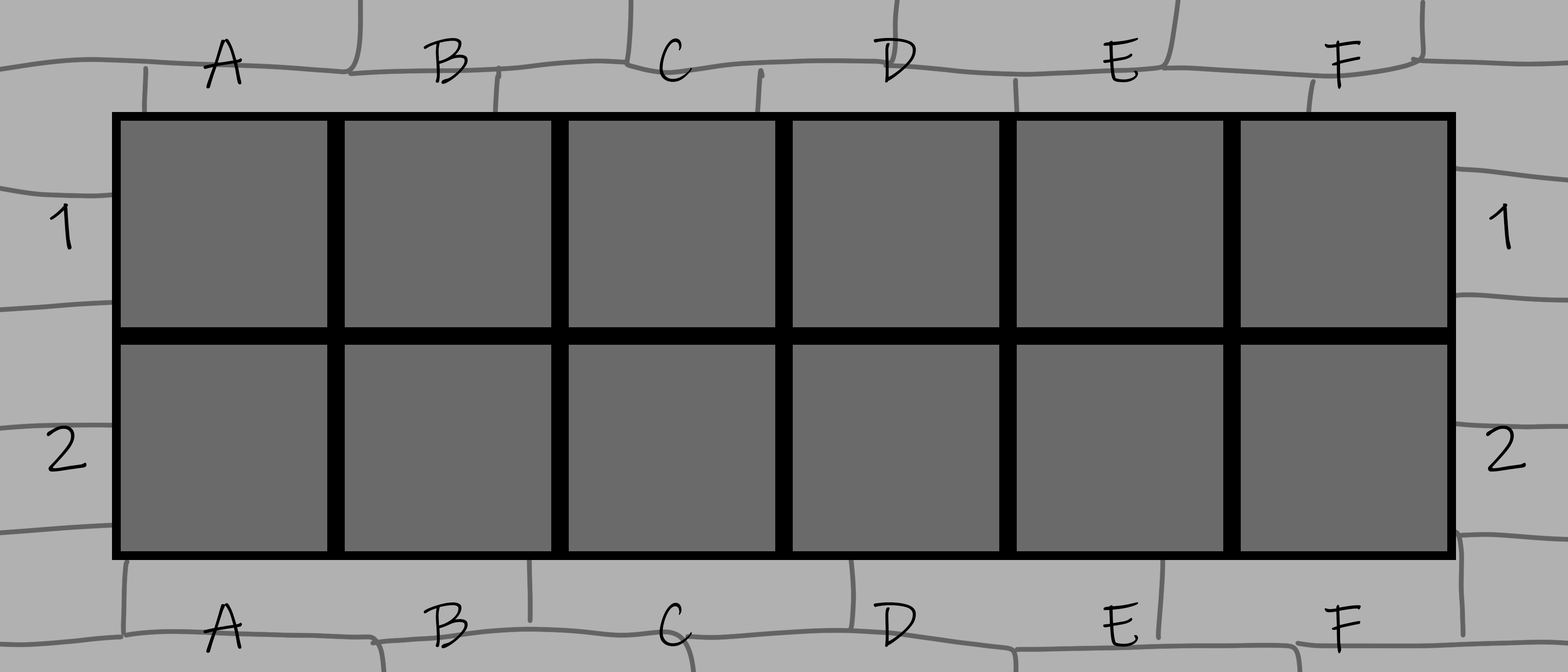
<style>
.page{position:relative;width:1568px;height:672px;background:#6a6a6a}
.page>*{position:absolute;margin:0}
.t1{font:65.6px "InkFree";color:#000000}
</style>
<div class="page">
<p class="t1" style="left:203px;top:38px;width:39px;height:51px">A</p>
<p class="t1" style="left:424px;top:38px;width:44px;height:46px">B</p>
<p class="t1" style="left:659px;top:38px;width:33px;height:44px">C</p>
<p class="t1" style="left:874px;top:38px;width:42px;height:45px">D</p>
<p class="t1" style="left:1103px;top:38px;width:35px;height:44px">E</p>
<p class="t1" style="left:1324px;top:40px;width:37px;height:49px">F</p>
<p class="t1" style="left:50px;top:203px;width:22px;height:47px">1</p>
<p class="t1" style="left:1489px;top:203px;width:22px;height:47px">1</p>
<p class="t1" style="left:46px;top:425px;width:41px;height:47px">2</p>
<p class="t1" style="left:1486px;top:425px;width:40px;height:47px">2</p>
<p class="t1" style="left:203px;top:603px;width:39px;height:50px">A</p>
<p class="t1" style="left:424px;top:602px;width:44px;height:46px">B</p>
<p class="t1" style="left:659px;top:602px;width:33px;height:45px">C</p>
<p class="t1" style="left:874px;top:602px;width:42px;height:45px">D</p>
<p class="t1" style="left:1103px;top:602px;width:35px;height:45px">E</p>
<p class="t1" style="left:1324px;top:605px;width:37px;height:49px">F</p>
</div>
